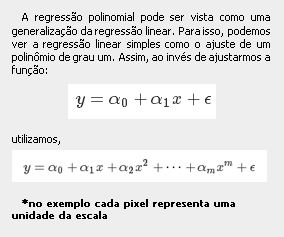
<style>
.page{position:relative;width:284px;height:237px;background:#eeeeee}
.page>*{position:absolute;margin:0}
.t1{font:11px "Tahoma";color:#000000}
.t2{font:10px "Tahoma";color:#000000;font-weight:bold}
</style>
<div class="page">
<p class="t1" style="left:12px;top:12px;width:258px;height:207px;text-align:justify">A regressão polinomial pode ser vista como uma generalização da regressão linear. Para isso, podemos ver a regressão linear simples como o ajuste de um polinômio de grau um. Assim, ao invés de ajustarmos a função:<br><br><br><br>utilizamos,<br><br><br><br><br><span class="t2">*no exemplo cada pixel representa uma unidade da escala</span></p>
</div>
